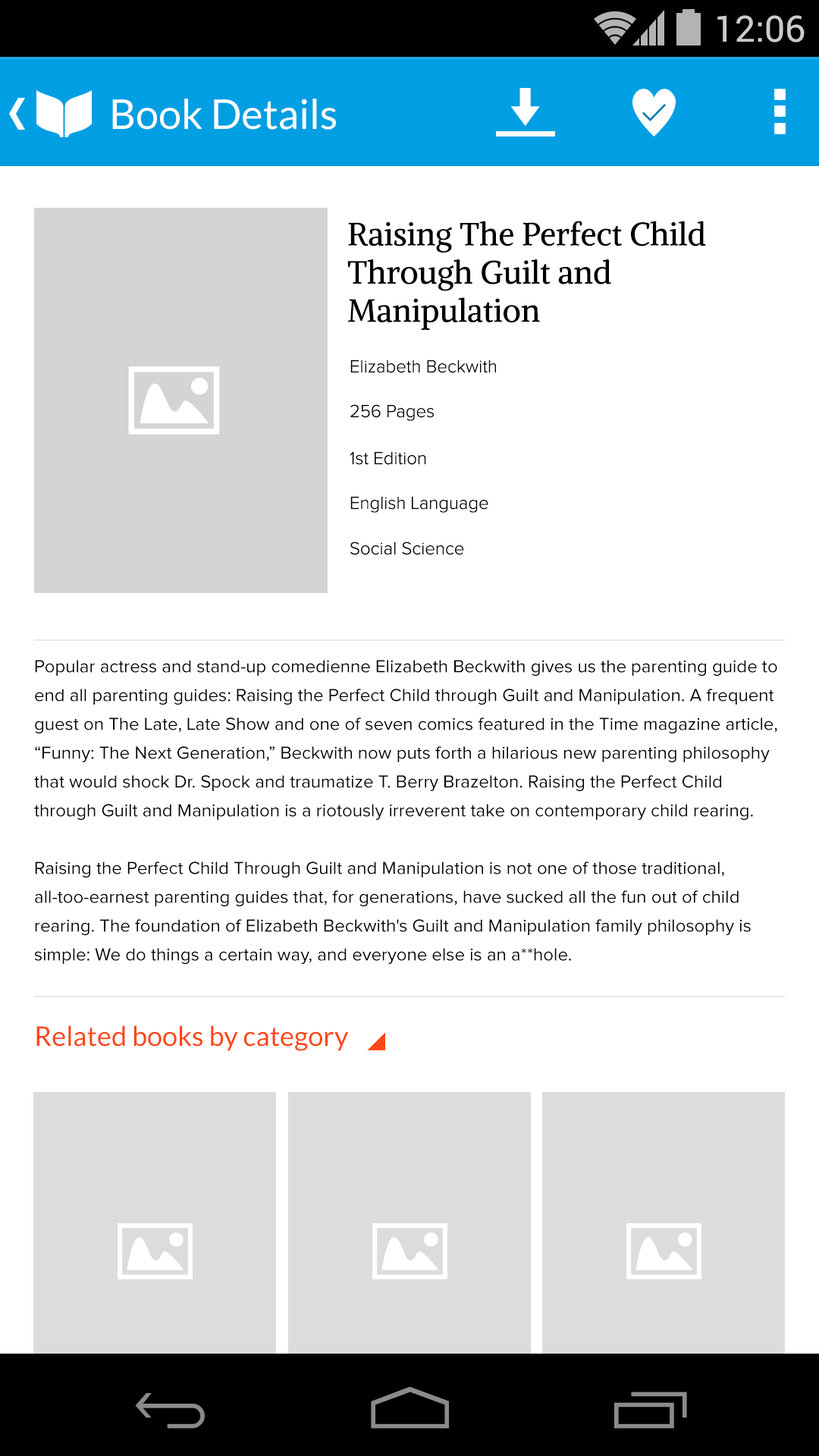
<style>
.page{position:relative;width:819px;height:1456px;background:#ffffff}
.page>*{position:absolute;margin:0}
.t1{font:36.4px "Roboto-Regular";color:#cbcbcb}
.t2{font:40.9px "Lato-Regular";color:#ffffff}
.t3{font:31.8px "Alike-Regular";color:#000000}
.t4{font:18.2px "ProximaNova-Light";color:#000000}
.t5{font:18.2px/28.8px "ProximaNova-Regular";color:#000000}
.t6{font:27.3px "Lato-Regular";color:#ff4717}
</style>
<div class="page">
<p class="t1" style="left:717px;top:15px;width:88px;height:27px">12:06</p>
<p class="t2" style="left:112px;top:99px;width:224px;height:31px">Book Details</p>
<p class="t3" style="left:347px;top:221px;width:359px;height:109px">Raising The Perfect Child Through Guilt and Manipulation</p>
<p class="t4" style="left:350px;top:360px;width:146px;height:13px">Elizabeth Beckwith</p>
<p class="t4" style="left:350px;top:404px;width:84px;height:17px">256 Pages</p>
<p class="t4" style="left:350px;top:452px;width:76px;height:13px">1st Edition</p>
<p class="t4" style="left:350px;top:497px;width:138px;height:16px">English Language</p>
<p class="t4" style="left:350px;top:541px;width:114px;height:14px">Social Science</p>
<p class="t5" style="left:34px;top:660px;width:743px;height:305px">Popular actress and stand-up comedienne Elizabeth Beckwith gives us the parenting guide to end all parenting guides: Raising the Perfect Child through Guilt and Manipulation. A frequent guest on The Late, Late Show and one of seven comics featured in the Time magazine article, “Funny: The Next Generation,” Beckwith now puts forth a hilarious new parenting philosophy that would shock Dr. Spock and traumatize T. Berry Brazelton. Raising the Perfect Child through Guilt and Manipulation is a riotously irreverent take on contemporary child rearing.<br><br>Raising the Perfect Child Through Guilt and Manipulation is not one of those traditional, all-too-earnest parenting guides that, for generations, have sucked all the fun out of child rearing. The foundation of Elizabeth Beckwith's Guilt and Manipulation family philosophy is simple: We do things a certain way, and everyone else is an a**hole.</p>
<p class="t6" style="left:36px;top:1025px;width:313px;height:26px">Related books by category</p>
</div>
